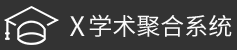
<style>
.page{position:relative;width:237px;height:50px;background:#333333}
.page>*{position:absolute;margin:0}
.t1{font:27px "SourceHanSansCN-Regular";color:#fafafa}
.t2{font:24px "SourceHanSansCN-Regular";color:#fafafa}
</style>
<div class="page">
<p class="t1" style="left:70px;top:16px;width:15px;height:20px">X</p>
<p class="t2" style="left:89px;top:14px;width:143px;height:23px">学术聚合系统</p>
</div>
